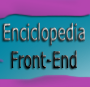
<style>
.page{position:relative;width:90px;height:87px}
.page>*{position:absolute;margin:0}
.t1{font:22.9px "Verdana";scale:0.59 1}
</style>
<div class="page">
<p class="t1" style="left:3px;top:22px;width:82px;height:47px;text-align:center">Enciclopedia<br>Front-End</p>
</div>
